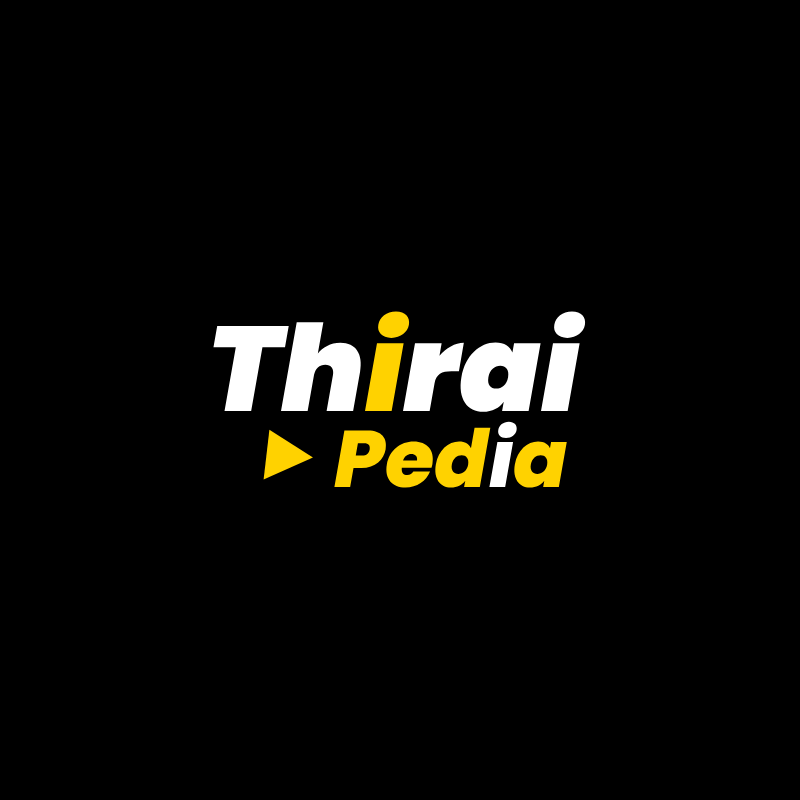
<style>
.page{position:relative;width:800px;height:800px;background:#000000}
.page>*{position:absolute;margin:0}
.t1{font:120px "Poppins-BlackItalic";color:#ffffff}
.t2{font:120px "Poppins-BlackItalic";color:#ffd200}
.t3{font:80px "Poppins-ExtraBoldItalic";color:#ffd200}
.t4{font:80px "Poppins-ExtraBoldItalic";color:#ffffff}
</style>
<div class="page">
<p class="t1" style="left:213px;top:311px;width:374px;height:101px">Th<span class="t2">i</span>rai</p>
<p class="t3" style="left:334px;top:421px;width:233px;height:67px">Ped<span class="t4">i</span>a</p>
</div>
